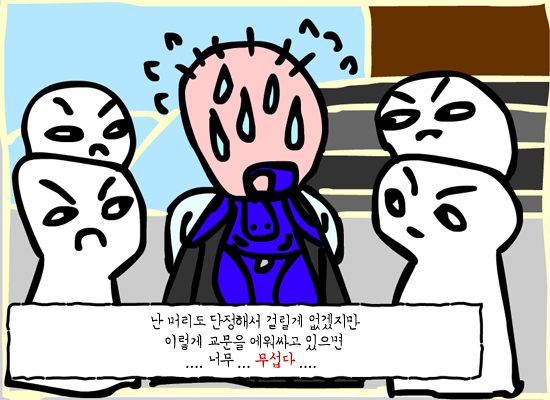
<style>
.page{position:relative;width:550px;height:400px;background:#ffffff}
.page>*{position:absolute;margin:0}
.t1{font:18px "SanGw";letter-spacing:-0.05em;color:#000000;scale:0.9 1}
.t2{font:18px "SanGw";letter-spacing:-0.05em;color:#d00000;font-weight:bold;scale:0.9 1}
</style>
<div class="page">
<p class="t1" style="left:151px;top:312px;width:209px;height:18px">난 머리도 단정해서 걸릴게 없겠지만</p>
<p class="t1" style="left:165px;top:333px;width:177px;height:18px">이렇게 교문을 에워싸고 있으면</p>
<p class="t1" style="left:186px;top:351px;width:130px;height:17px">.... 너무 ... <span class="t2">무섭다</span> ....</p>
</div>
